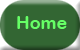
<style>
.page{position:relative;width:80px;height:50px;background:#336633}
.page>*{position:absolute;margin:0}
.t1{font:18px "ArialRoundedMTBold";color:#66ff66}
</style>
<div class="page">
<p class="t1" style="left:16px;top:13px;width:51px;height:20px">Home</p>
</div>
